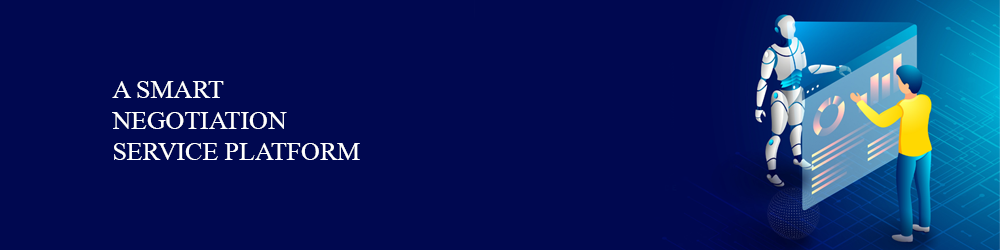
<style>
.page{position:relative;width:1000px;height:250px;background:#000850}
.page>*{position:absolute;margin:0}
.t1{font:25.9px "MongolianBaiti";color:#ffffff;text-transform:uppercase}
</style>
<div class="page">
<p class="t1" style="left:112px;top:81px;width:248px;height:79px">A SMART <br>Negotiation <br>Service Platform</p>
</div>
